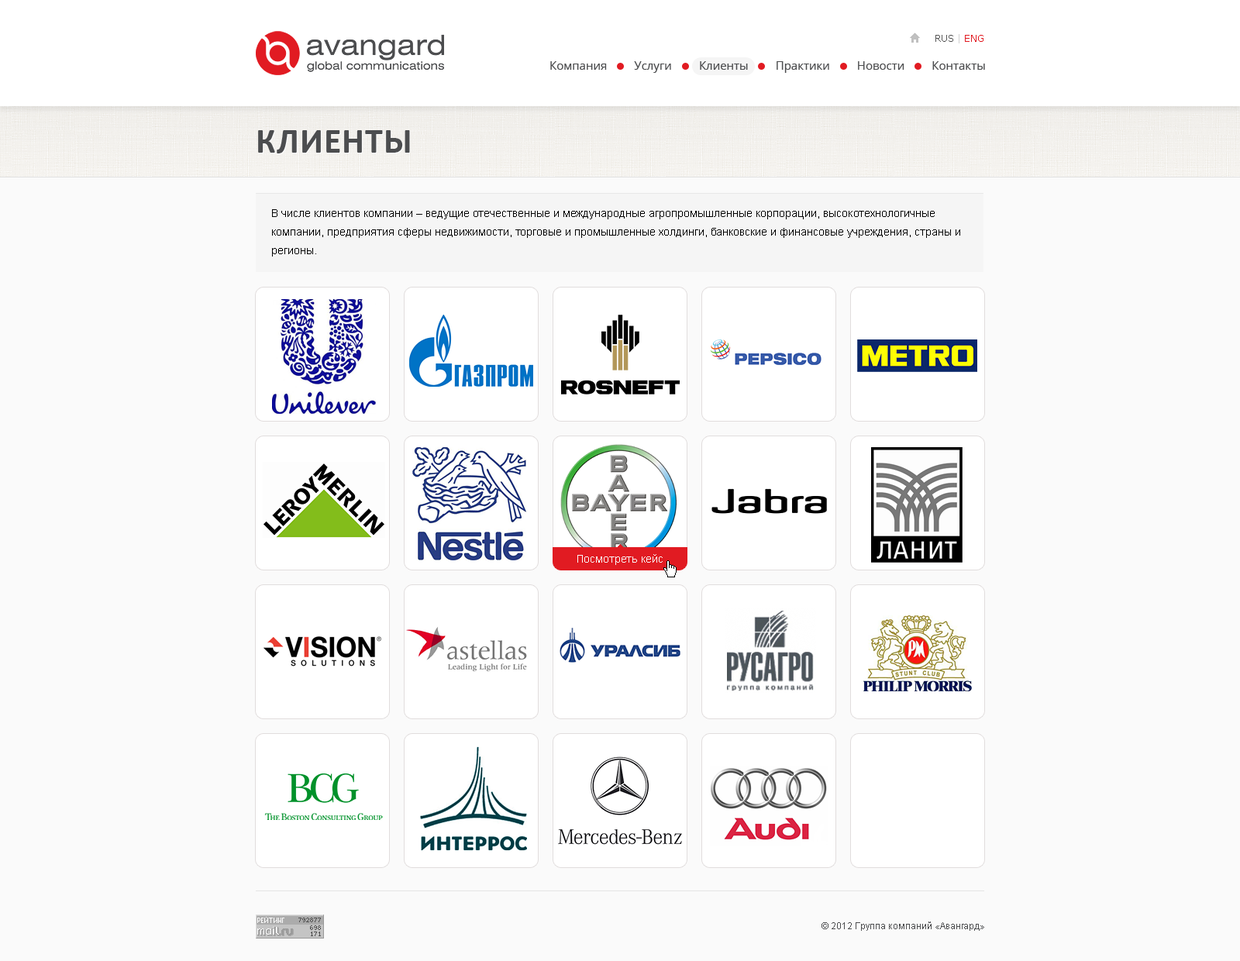
<style>
.page{position:relative;width:1240px;height:961px;background:#fafafa}
.page>*{position:absolute;margin:0}
.t1{font:9.3px "Verdana";color:#555555}
.t2{font:9.3px "Verdana";color:#d1d1d1}
.t3{font:9.3px "Verdana";color:#e11b22}
.t4{font:11.6px "OpenSans";color:#4c4d4f}
.t5{font:35.7px "Calibri-Bold";letter-spacing:0.02em;color:#4c4d4f;text-transform:uppercase}
.t6{font:10.9px/18.6px "ArialMT";color:#000000}
.t7{font:10.9px "ArialMT";color:#fafafa}
.t8{font:9.3px "ArialMT";color:#4c4d4f}
</style>
<div class="page">
<p class="t1" style="left:936px;top:34px;width:48px;height:9px">RUS<span class="t2"> | </span><span class="t3">ENG</span></p>
<p class="t4" style="left:550px;top:61px;width:435px;height:12px">Компания         Услуги         Клиенты         Практики         Новости         Контакты</p>
<p class="t5" style="left:258px;top:130px;width:152px;height:24px">Клиенты</p>
<p class="t6" style="left:272px;top:209px;width:689px;height:48px">В числе клиентов компании – ведущие отечественные и международные агропромышленные корпорации, высокотехнологичные компании, предприятия сферы недвижимости, торговые и промышленные холдинги, банковские и финансовые учреждения, страны и регионы.</p>
<p class="t7" style="left:578px;top:554px;width:85px;height:11px">Посмотреть кейс</p>
<p class="t8" style="left:822px;top:922px;width:163px;height:9px">© 2012 Группа компаний «Авангард»</p>
</div>
